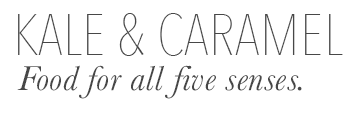
<style>
.page{position:relative;width:350px;height:118px;background:#ffffff}
.page>*{position:absolute;margin:0}
.t1{font:58px "AvenirNextCondensed-UltraLight";letter-spacing:0.01em;color:#474747}
.t2{font:36px "Baskerville-Italic";letter-spacing:0.01em;color:#474747}
</style>
<div class="page">
<p class="t1" style="left:18px;top:13px;width:325px;height:43px">KALE &amp; CARAMEL</p>
<p class="t2" style="left:17px;top:65px;width:285px;height:34px">Food for all five senses.</p>
</div>
